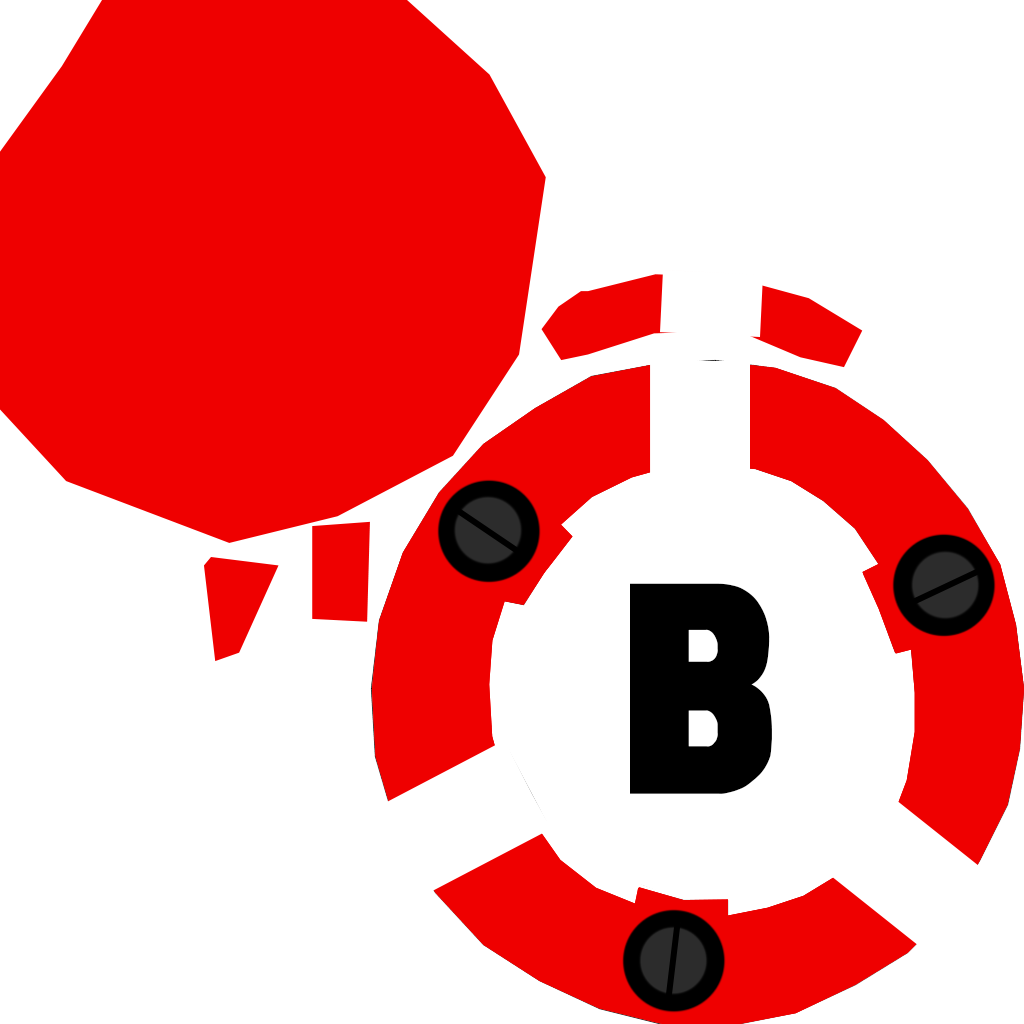
<style>
.page{position:relative;width:1024px;height:1024px;background:#ffffff}
.page>*{position:absolute;margin:0}
.t1{font:300px "Arwing";color:#000000}
</style>
<div class="page">
<p class="t1" style="left:630px;top:583px;width:142px;height:211px">B</p>
</div>
